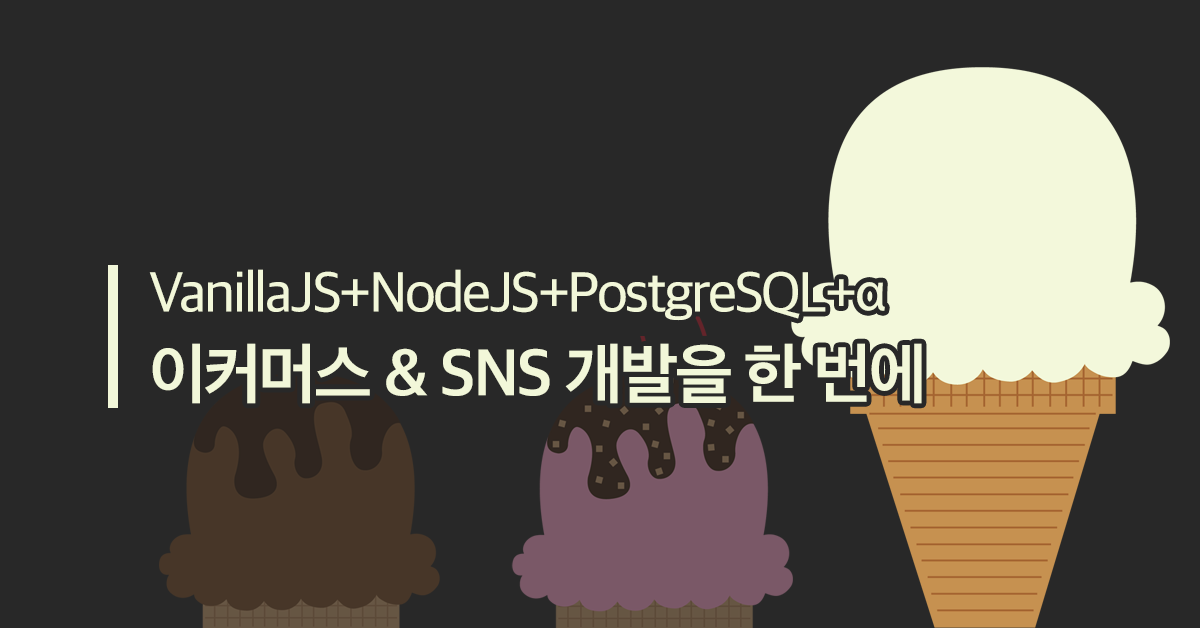
<style>
.page{position:relative;width:1200px;height:628px;background:#282828}
.page>*{position:absolute;margin:0}
.t1{font:58.3px/83.3px "AppleSDGothicNeo-Medium";letter-spacing:-0.04em;color:#f2f7d9}
.t2{font:66.7px/83.3px "AppleSDGothicNeo-Bold";letter-spacing:-0.04em;color:#f2f7d9}
</style>
<div class="page">
<p class="t1" style="left:149px;top:269px;width:773px;height:135px">VanillaJS+NodeJS+PostgreSQL+α<br><span class="t2">이커머스 &amp; SNS 개발을 한 번에</span></p>
</div>
